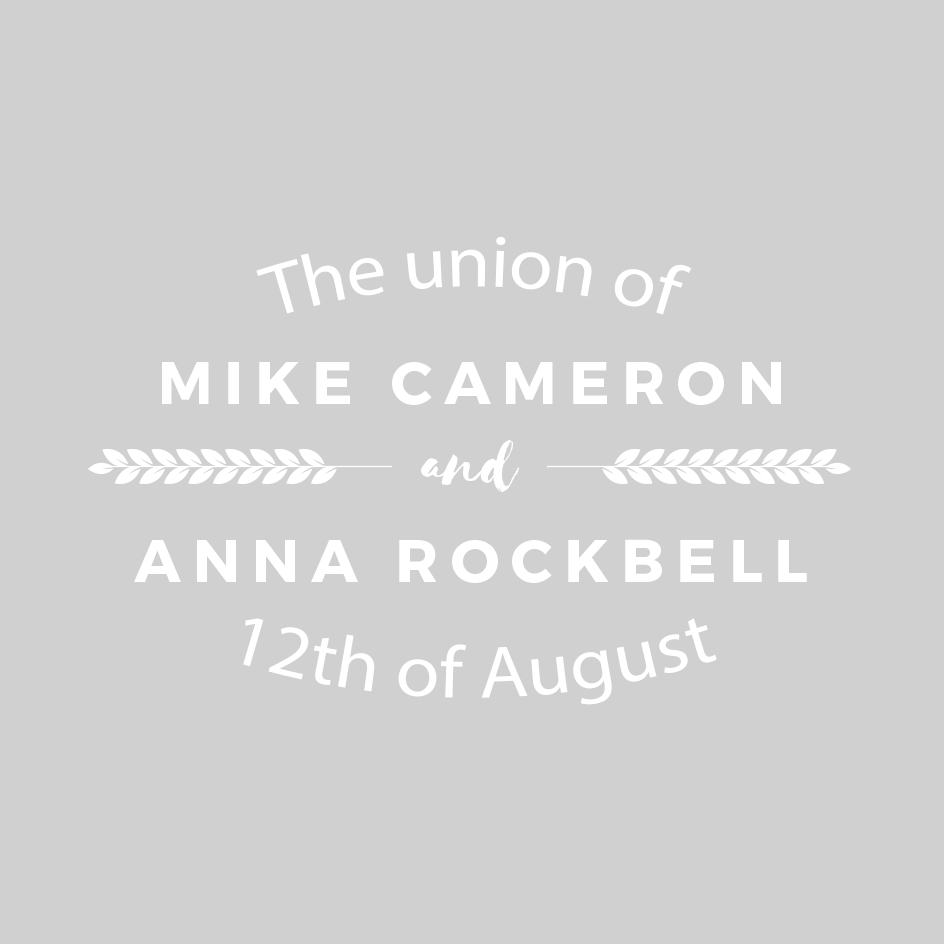
<style>
.page{position:relative;width:944px;height:944px;background:#d0d0d0}
.page>*{position:absolute;margin:0}
.t1{font:74px "MyriadPro-Regular";color:#ffffff}
.t2{font:60.1px "Montserrat-Bold";letter-spacing:0.2em;color:#ffffff}
.t3{font:73.2px "Selima";color:#ffffff}
</style>
<div class="page">
<p class="t1" style="left:256px;top:236px;width:436px;height:79px">The union of</p>
<p class="t2" style="left:162px;top:362px;width:619px;height:43px">MIKE CAMERON</p>
<p class="t3" style="left:421px;top:440px;width:99px;height:52px">and</p>
<p class="t2" style="left:134px;top:539px;width:673px;height:44px">ANNA ROCKBELL</p>
<p class="t1" style="left:243px;top:618px;width:474px;height:87px">12th of August</p>
</div>
